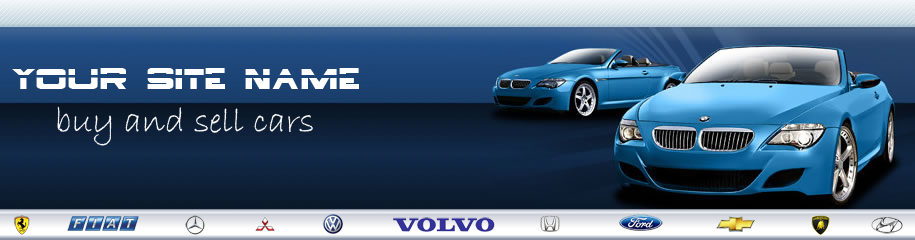
<style>
.page{position:relative;width:915px;height:240px}
.page>*{position:absolute;margin:0}
.t1{font:36px "Borg9";color:#ffffff}
.t2{font:36px "BradleyHandITC";color:#ffffff}
</style>
<div class="page">
<p class="t1" style="left:12px;top:68px;width:347px;height:21px">Your Site name</p>
<p class="t2" style="left:57px;top:106px;width:256px;height:40px">buy and sell cars</p>
</div>
